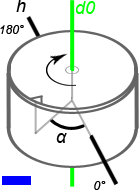
<style>
.page{position:relative;width:139px;height:190px;background:#ffffff}
.page>*{position:absolute;margin:0}
.t1{font:18px "Arial-ItalicMT";color:#000000}
.t2{font:18px "Arial-ItalicMT";color:#00ff00}
.t3{font:12px "Arial-ItalicMT";color:#000000}
</style>
<div class="page">
<p class="t1" style="left:16px;top:0px;width:10px;height:12px">h</p>
<p class="t2" style="left:75px;top:1px;width:21px;height:13px">d0</p>
<p class="t3" style="left:0px;top:25px;width:24px;height:9px">180°</p>
<p class="t1" style="left:56px;top:133px;width:11px;height:10px">α</p>
<p class="t3" style="left:94px;top:181px;width:12px;height:9px">0°</p>
</div>
